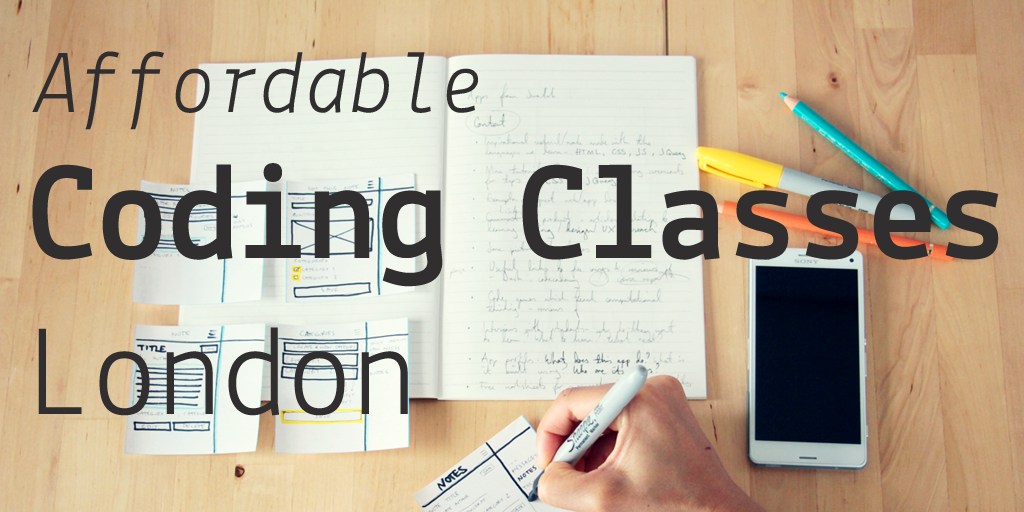
<style>
.page{position:relative;width:1024px;height:512px}
.page>*{position:absolute;margin:0}
.t1{font:90px "Lekton-Italic";color:#302e2e}
.t2{font:140px "Lekton-Bold";color:#302e2e}
.t3{font:130px "Lekton-Regular";color:#302e2e}
</style>
<div class="page">
<p class="t1" style="left:32px;top:51px;width:446px;height:79px">Affordable</p>
<p class="t2" style="left:32px;top:163px;width:967px;height:253px">Coding Classes<span class="t3"> London</span></p>
</div>
